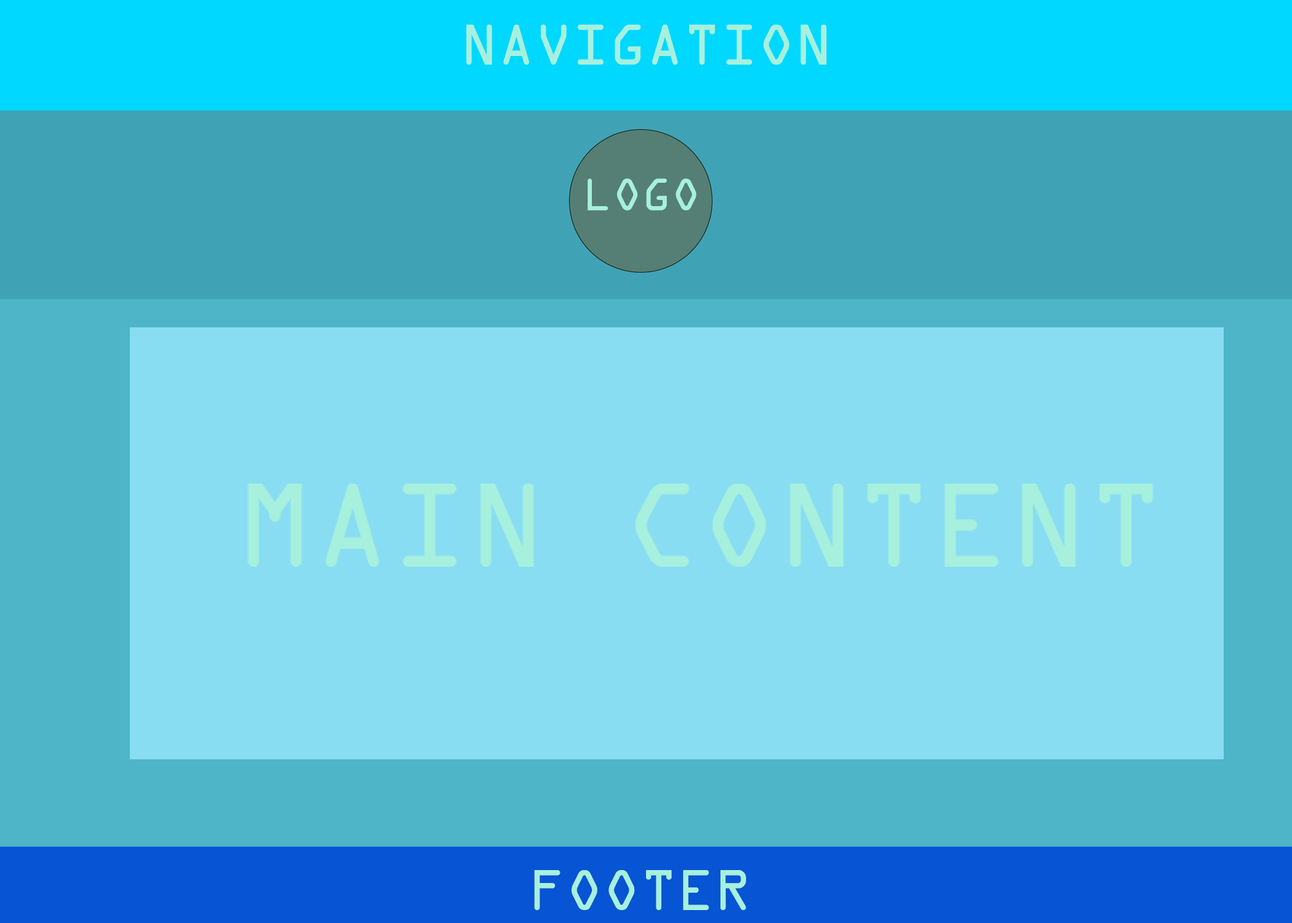
<style>
.page{position:relative;width:1292px;height:923px;background:#88ddf2}
.page>*{position:absolute;margin:0}
.t1{font:61.5px "OCRAExtended";color:#a7f0de}
.t2{font:48.7px "OCRAExtended";color:#a7f0de}
</style>
<div class="page">
<p class="t1" style="left:466px;top:25px;width:361px;height:40px">NAVIGATION</p>
<p class="t2" style="left:588px;top:178px;width:108px;height:32px">LOGO</p>
<p class="t1" style="left:534px;top:870px;width:212px;height:40px">FOOTER</p>
</div>
